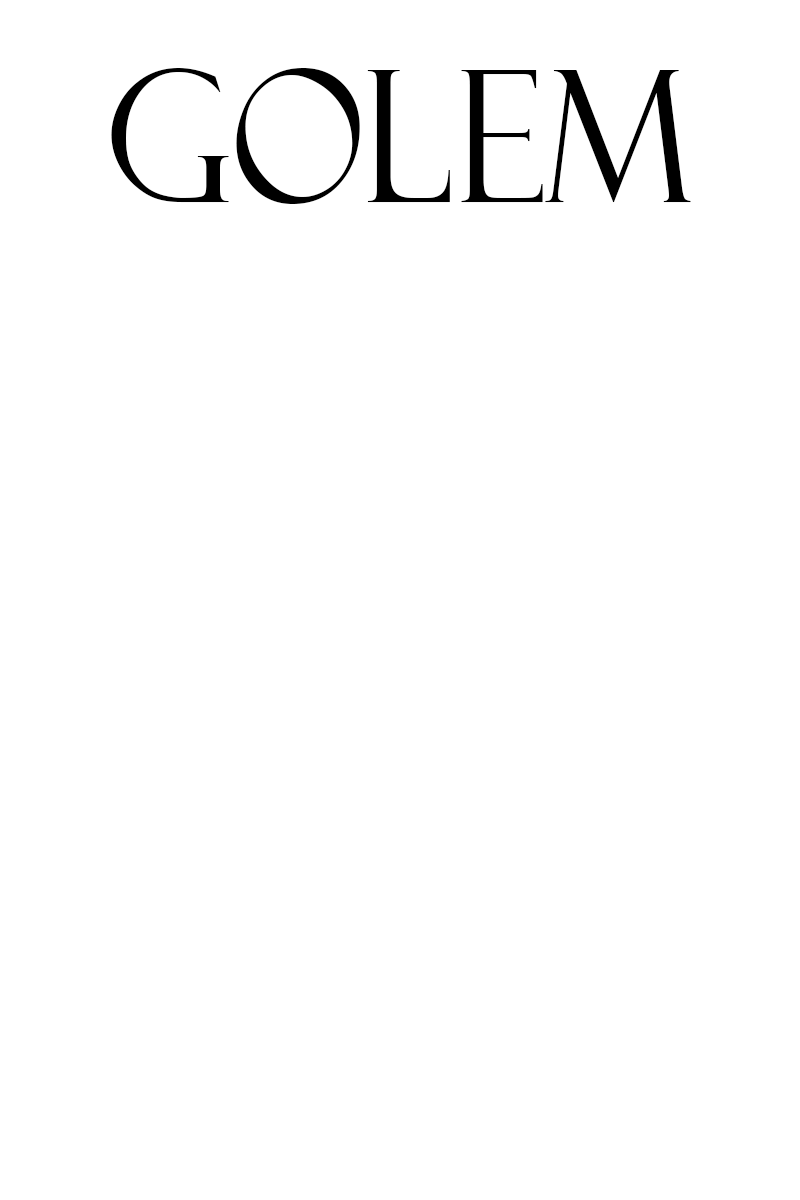
<style>
.page{position:relative;width:800px;height:1200px;background:#ffffff}
.page>*{position:absolute;margin:0}
.t1{font:182.7px "FelixTitlingMT";color:#000000;scale:0.91 1}
</style>
<div class="page">
<p class="t1" style="left:111px;top:68px;width:580px;height:136px">GOLEM</p>
</div>
